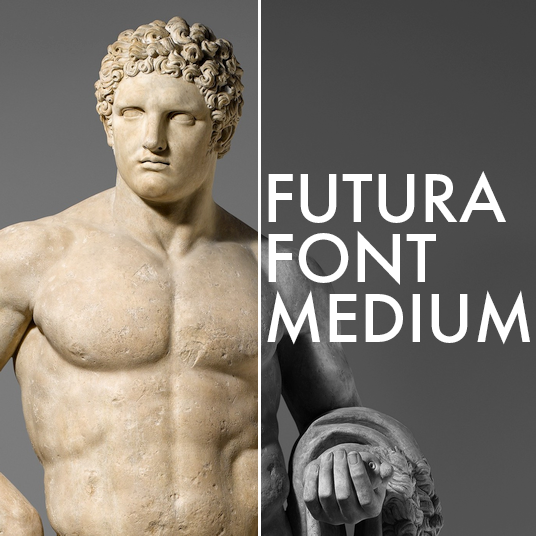
<style>
.page{position:relative;width:536px;height:536px}
.page>*{position:absolute;margin:0}
.t1{font:72px/60px "FuturaPT-Medium";color:#ffffff}
</style>
<div class="page">
<p class="t1" style="left:267px;top:171px;width:263px;height:174px">FUTURA<br>FONT<br>MEDIUM</p>
</div>
